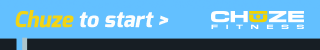
<style>
.page{position:relative;width:320px;height:50px;background:#63c0ff}
.page>*{position:absolute;margin:0}
.t1{font:22px "Exo-ExtraBold";color:#f2d414;font-style:italic}
.t2{font:22px "Exo-ExtraBold";color:#fcfdfd;font-style:italic}
.t3{font:22px "Exo-ExtraBold";letter-spacing:-0.08em;color:#fcfdfd;font-style:italic}
</style>
<div class="page">
<p class="t1" style="left:15px;top:10px;width:59px;height:18px">Chuze</p>
<p class="t2" style="left:79px;top:12px;width:90px;height:16px">to start <span class="t3">&gt;</span></p>
</div>
